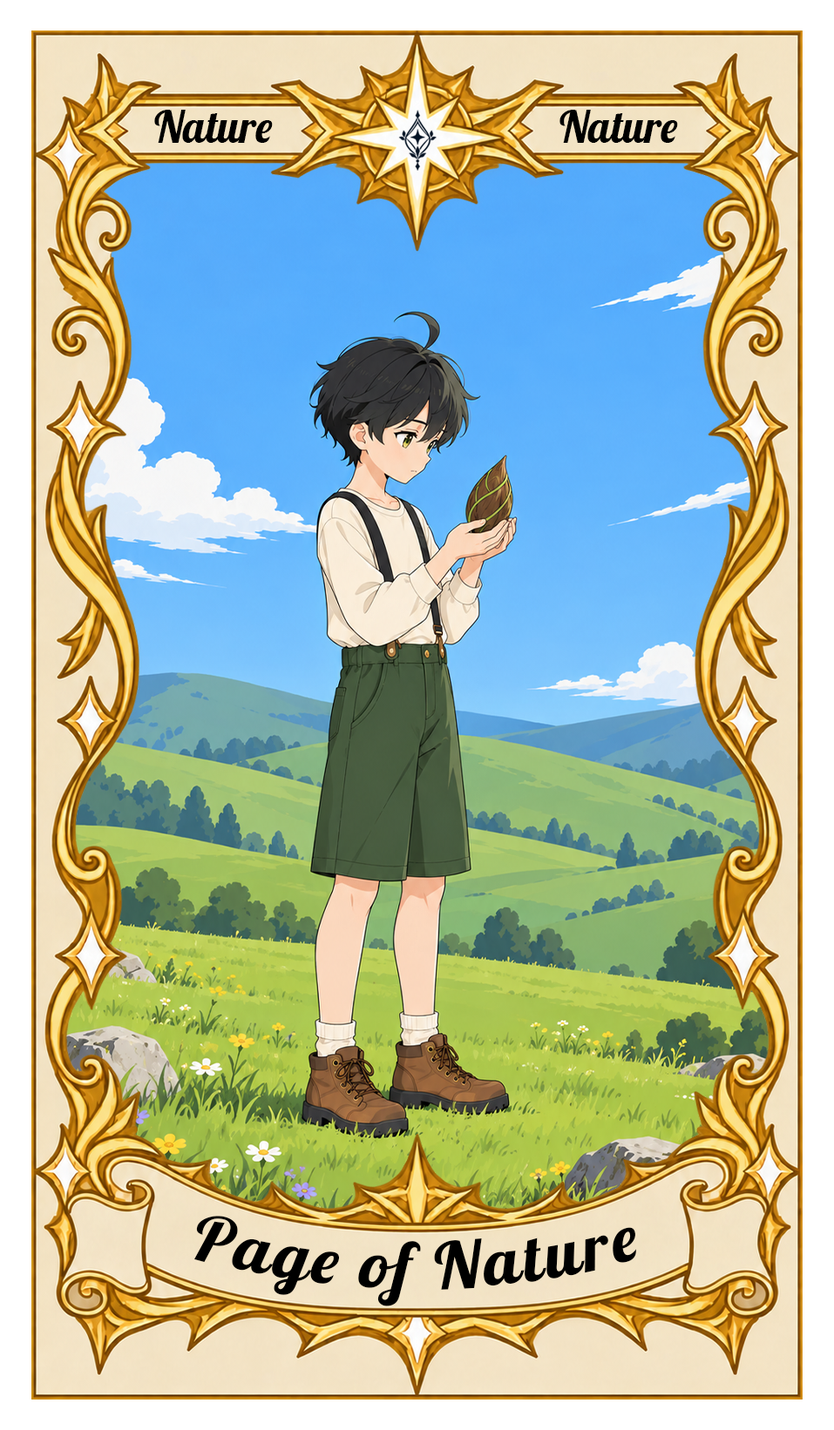
<style>
.page{position:relative;width:834px;height:1430px}
.page>*{position:absolute;margin:0}
.t1{font:43.6px "Lobster-Regular";color:#000000}
.t2{font:65.3px "Lobster-Regular";letter-spacing:0.05em;color:#000000}
</style>
<div class="page">
<p class="t1" style="left:154px;top:110px;width:119px;height:33px">Nature</p>
<p class="t1" style="left:559px;top:110px;width:119px;height:33px">Nature</p>
<p class="t2" style="left:194px;top:1216px;width:442px;height:91px">Page of Nature</p>
</div>
